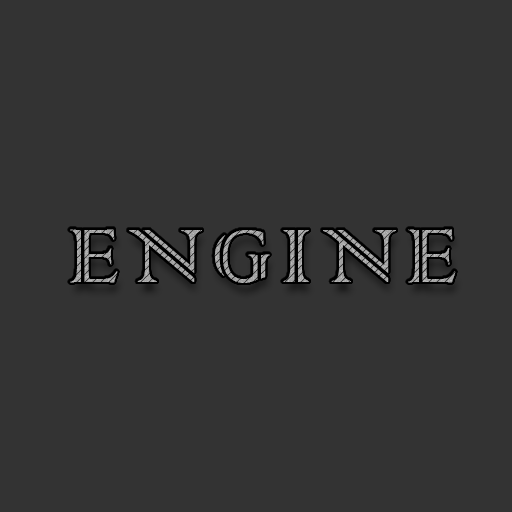
<style>
.page{position:relative;width:512px;height:512px;background:#333333}
.page>*{position:absolute;margin:0}
.t1{font:100px "ColonnaMT";letter-spacing:0.075em;color:#a1a1a1}
</style>
<div class="page">
<p class="t1" style="left:70px;top:229px;width:386px;height:54px">ENGINE</p>
</div>
